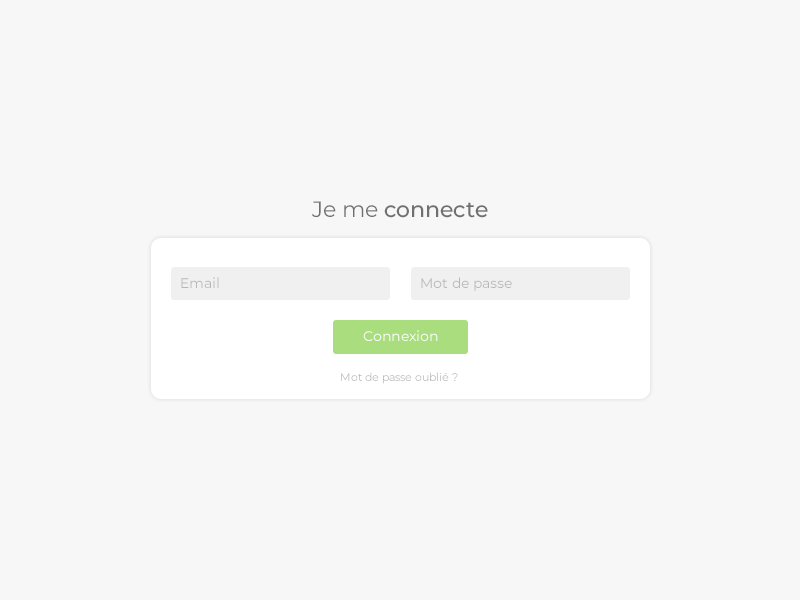
<style>
.page{position:relative;width:800px;height:600px;background:#f7f7f7}
.page>*{position:absolute;margin:0}
.t1{font:22px "Montserrat-Medium";color:#707070}
.t2{font:22px "Montserrat-Regular";color:#707070}
.t3{font:14px "Montserrat-Regular";color:#b7b7b7}
.t4{font:14px "Montserrat-Regular";color:#ffffff}
.t5{font:11px "Montserrat-Regular";color:#b7b7b7}
</style>
<div class="page">
<p class="t1" style="left:312px;top:201px;width:176px;height:17px"><span class="t2">Je me </span>connecte</p>
<p class="t3" style="left:181px;top:277px;width:38px;height:11px">Email</p>
<p class="t3" style="left:421px;top:277px;width:91px;height:14px">Mot de passe</p>
<p class="t4" style="left:363px;top:330px;width:75px;height:11px">Connexion</p>
<p class="t5" style="left:341px;top:372px;width:117px;height:12px">Mot de passe oublié ?</p>
</div>
